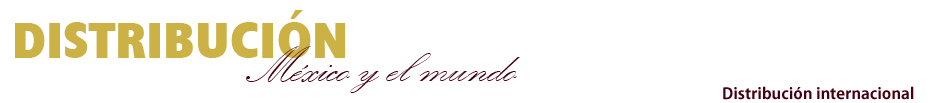
<style>
.page{position:relative;width:934px;height:103px;background:#ffffff}
.page>*{position:absolute;margin:0}
.t1{font:51.3px "Humanist521BT-XtraBoldCondensed";color:#ccb245;scale:1.05 1}
.t2{font:52.2px "KunstlerScript";color:#460010;scale:1.05 1}
.t3{font:15.2px "KozGoPr6N-Bold";color:#460010;scale:1.05 1}
</style>
<div class="page">
<p class="t1" style="left:15px;top:10px;width:331px;height:48px">DISTRIBUCIÓN</p>
<p class="t2" style="left:246px;top:46px;width:274px;height:47px">México y el mundo</p>
<p class="t3" style="left:723px;top:86px;width:191px;height:14px">Distribución internacional</p>
</div>
